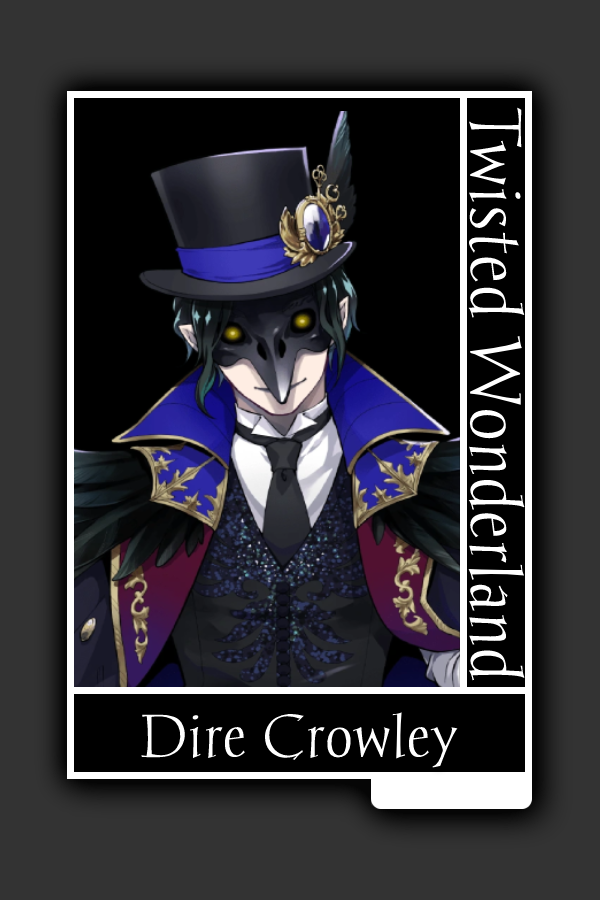
<style>
.page{position:relative;width:600px;height:900px;background:#000000}
.page>*{position:absolute;margin:0}
.t1{font:60px "Chantelli-Antiqua";color:#ffffff}
.t2{font:50px "Chantelli-Antiqua";color:#ffffff}
</style>
<div class="page">
<p class="t1" style="left:468px;top:107px;width:57px;height:574px;rotate:90deg">Twisted Wonderland</p>
<p class="t2" style="left:141px;top:712px;width:317px;height:56px">Dire Crowley</p>
</div>
